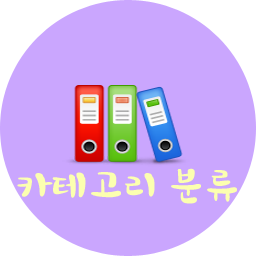
<style>
.page{position:relative;width:256px;height:256px;background:#caa6fe}
.page>*{position:absolute;margin:0}
.t1{font:36px "HoonWhayangR";color:#fcffb0;scale:1.1 1}
</style>
<div class="page">
<p class="t1" style="left:17px;top:168px;width:220px;height:36px">카테고리 분류</p>
</div>
